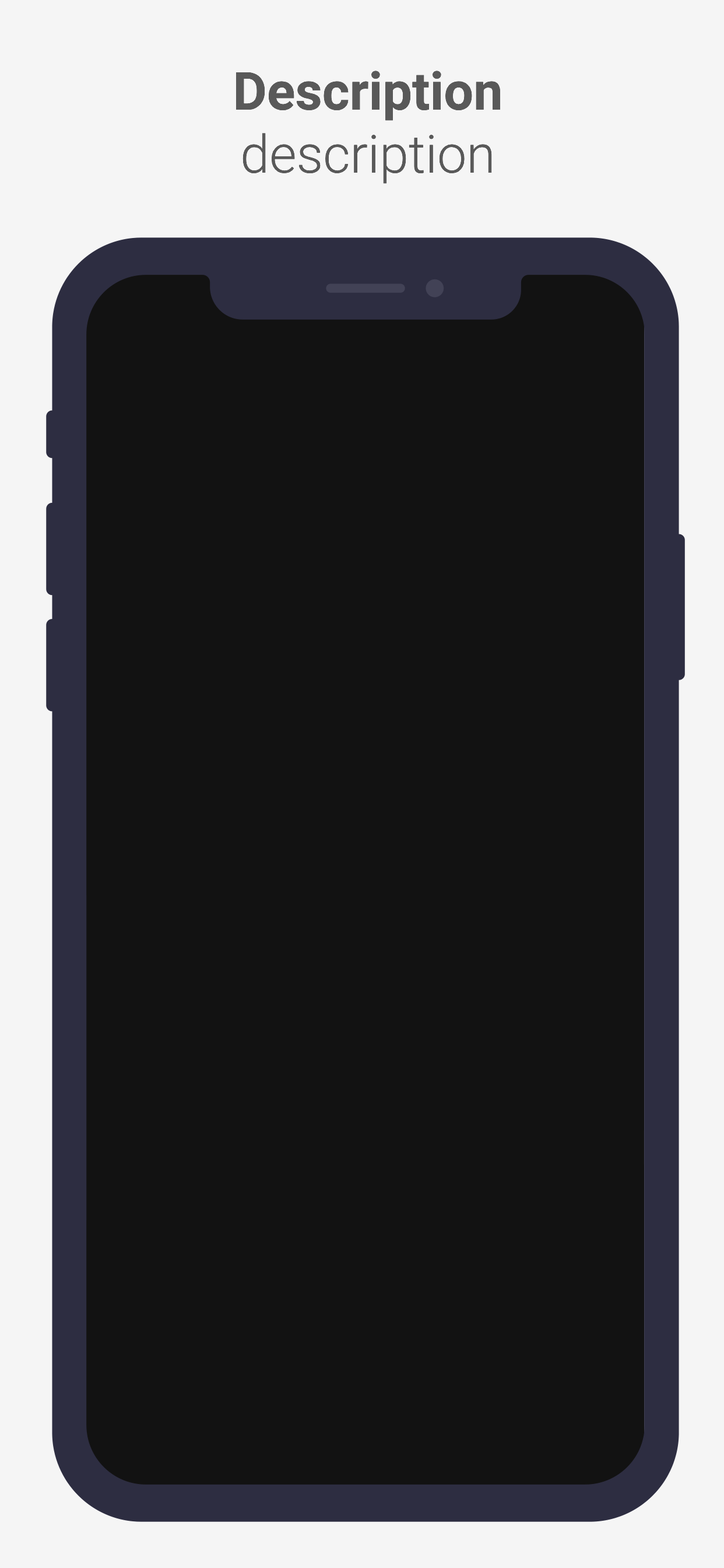
<style>
.page{position:relative;width:724px;height:1568px;background:#121212}
.page>*{position:absolute;margin:0}
.t1{font:52.5px "HelveticaNeue-Bold";color:#595959}
.t2{font:52.5px "HelveticaNeue-Light";color:#595959}
</style>
<div class="page">
<p class="t1" style="left:236px;top:71px;width:265px;height:113px;text-align:center">Description<br><span class="t2">description</span></p>
</div>
